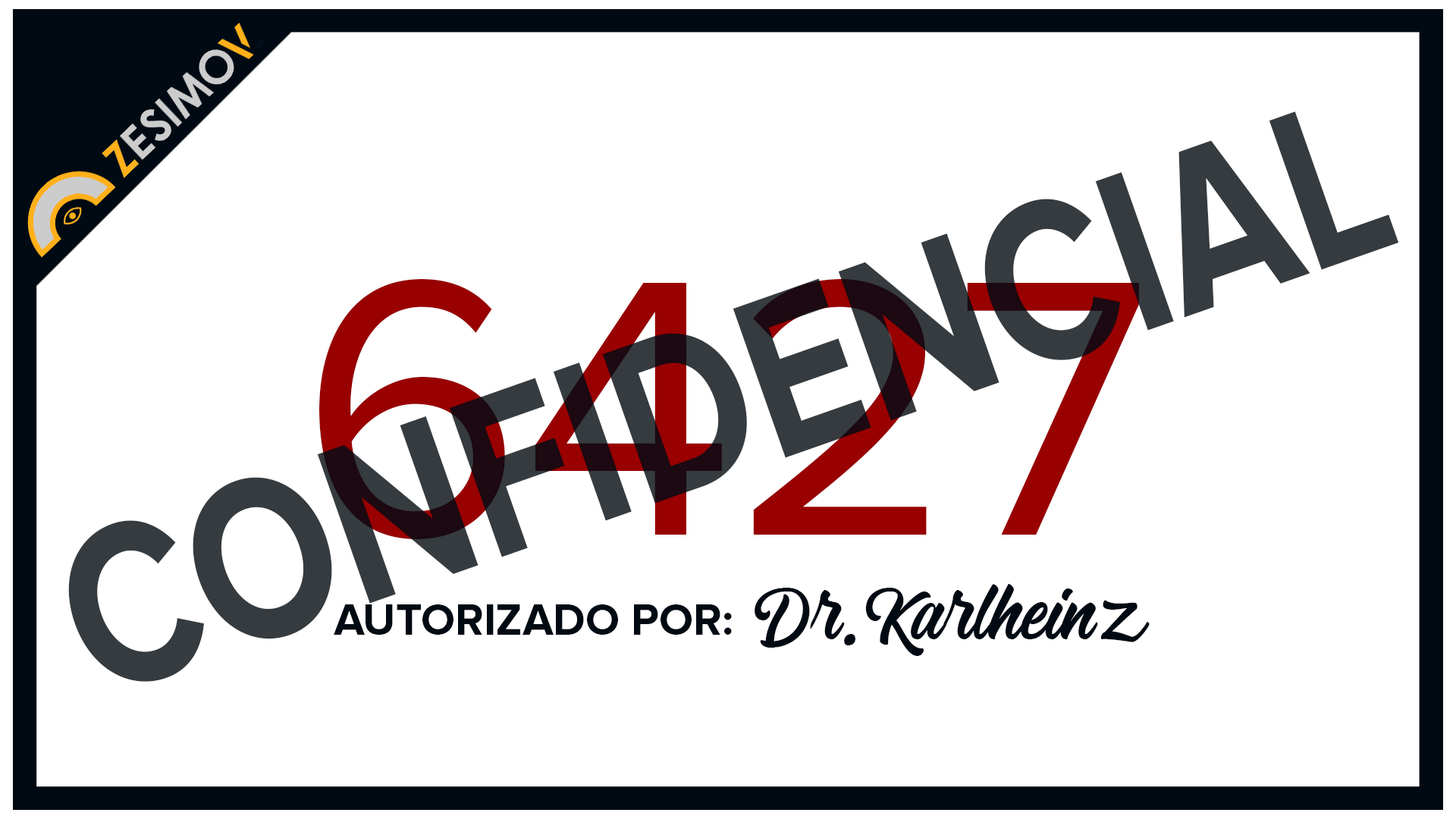
<style>
.page{position:relative;width:1456px;height:819px;background:#ffffff}
.page>*{position:absolute;margin:0}
.t1{font:236.6px "ProximaNova-Bold";color:#353b3f;scale:0.81 1}
.t2{font:377px "ProximaNova-Regular"}
.t3{font:73.3px "Blanchope-Regular";color:#010a13}
.t4{font:44.8px "ProximaNova-Bold";color:#010a13}
</style>
<div class="page">
<p class="t1" style="left:68px;top:111px;width:1331px;height:571px;rotate:-19deg">CONFIDENCIAL</p>
<p class="t2" style="left:319px;top:279px;width:820px;height:260px">6427</p>
<p class="t3" style="left:755px;top:584px;width:395px;height:72px">Dr.Karlheinz</p>
<p class="t4" style="left:334px;top:604px;width:398px;height:31px">AUTORIZADO POR:</p>
</div>
